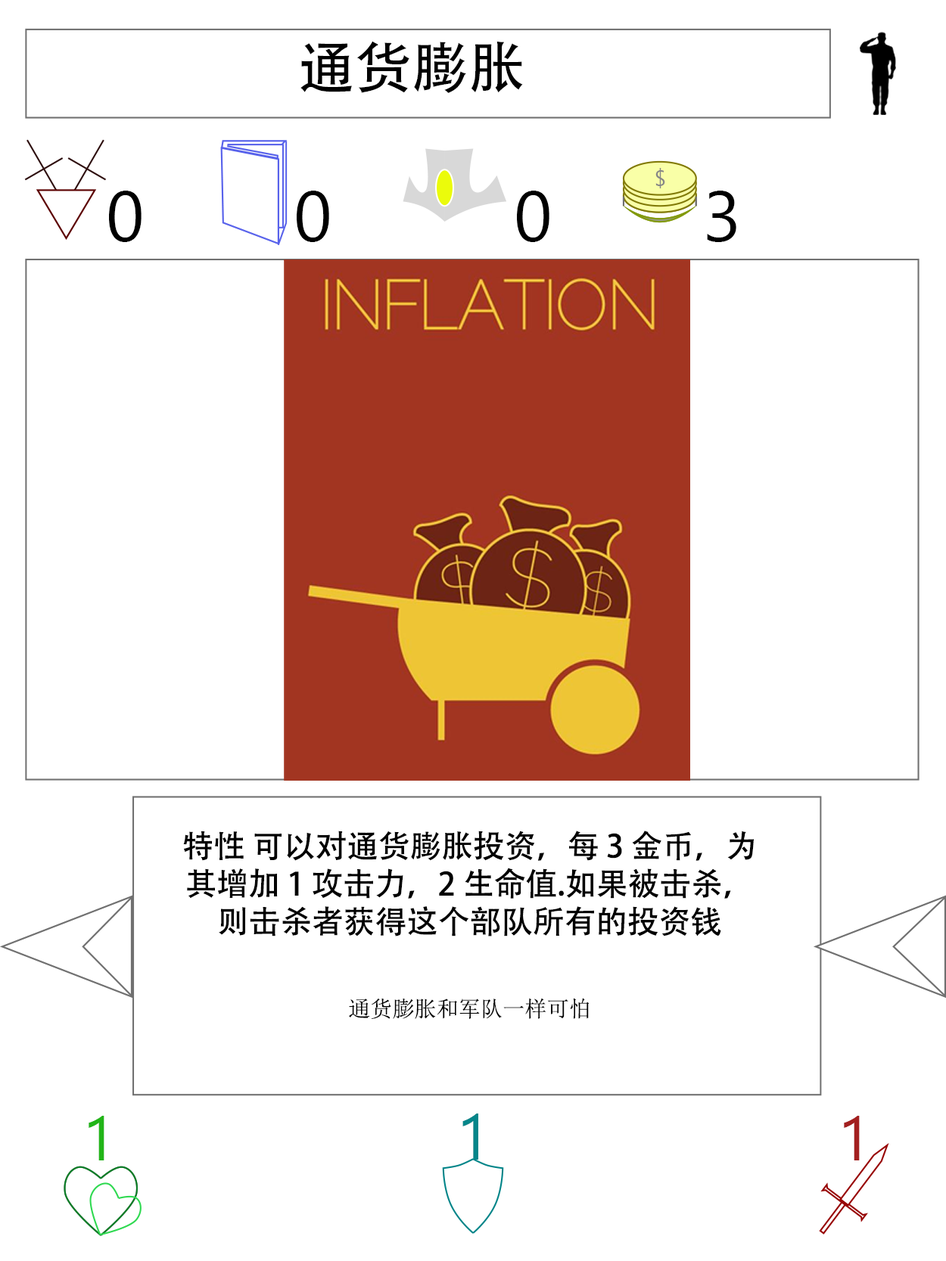
<style>
.page{position:relative;width:946px;height:1261px;background:#ffffff}
.page>*{position:absolute;margin:0}
.t1{font:56.7px "AdobeHeitiStd-Regular";color:#000000}
.t2{font:70.9px "SegoeUI";color:#000000}
.t3{font:31.5px "AdobeHeitiStd-Regular";color:#000000}
.t4{font:22.1px "NSimSun";color:#000000}
.t5{font:63px "SegoeUI";color:#22b518}
.t6{font:64.6px "SegoeUI";color:#05868a}
.t7{font:63px "SegoeUI";color:#a32020}
</style>
<div class="page">
<p class="t1" style="left:300px;top:41px;width:223px;height:52px">通货膨胀</p>
<p class="t2" style="left:109px;top:191px;width:32px;height:51px">0</p>
<p class="t2" style="left:297px;top:191px;width:32px;height:51px">0</p>
<p class="t2" style="left:517px;top:191px;width:32px;height:51px">0</p>
<p class="t2" style="left:707px;top:191px;width:29px;height:51px">3</p>
<p class="t3" style="left:183px;top:831px;width:570px;height:188px;text-align:center">特性 可以对通货膨胀投资，每 3 金币，为其增加 1 攻击力，2 生命值.如果被击杀，则击杀者获得这个部队所有的投资钱<br><br><span class="t4">通货膨胀和军队一样可怕</span></p>
<p class="t5" style="left:89px;top:1116px;width:15px;height:44px">1</p>
<p class="t6" style="left:462px;top:1114px;width:16px;height:46px">1</p>
<p class="t7" style="left:843px;top:1116px;width:16px;height:44px">1</p>
</div>
